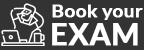
<style>
.page{position:relative;width:144px;height:50px;background:#333333}
.page>*{position:absolute;margin:0}
.t1{font:17.1px "Lato-Bold";color:#ffffff;font-weight:bold;scale:1.11 1}
.t2{font:29.9px "Lato-Bold";color:#ffffff;font-weight:bold}
</style>
<div class="page">
<p class="t1" style="left:52px;top:4px;width:91px;height:16px">Book your</p>
<p class="t2" style="left:52px;top:23px;width:86px;height:23px">EXAM</p>
</div>
